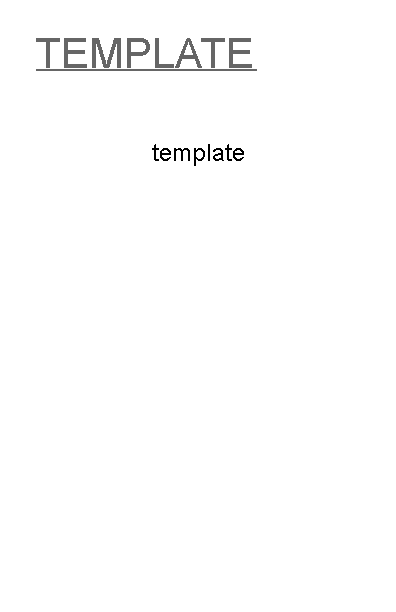
<style>
.page{position:relative;width:396px;height:612px;background:#ffffff}
.page>*{position:absolute;margin:0}
.t1{font:42px "ArialMT";color:#666666}
.t2{font:12px "ArialMT";color:#000000}
</style>
<div class="page">
<p class="t1" style="left:36px;top:38px;width:216px;height:30px">TEMPLATE</p>
<p class="t2" style="left:152px;top:144px;width:92px;height:22px">template</p>
</div>
